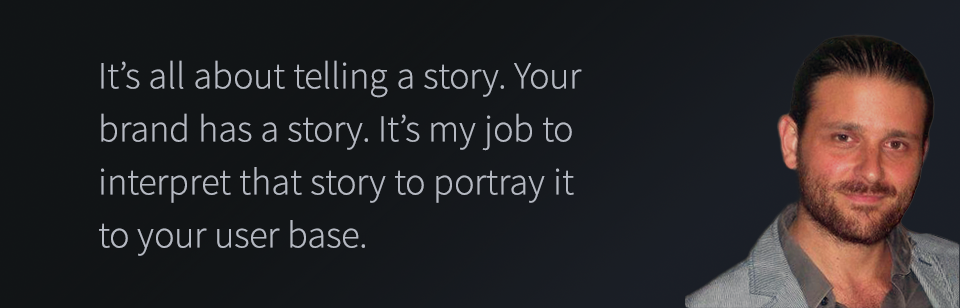
<style>
.page{position:relative;width:960px;height:308px}
.page>*{position:absolute;margin:0}
.t1{font:38px/53px "SourceSansPro-Light";color:#b5b9c2}
</style>
<div class="page">
<p class="t1" style="left:99px;top:60px;width:483px;height:196px">It’s all about telling a story. Your brand has a story. It’s my job to <br>interpret that story to portray it <br>to your user base.</p>
</div>
